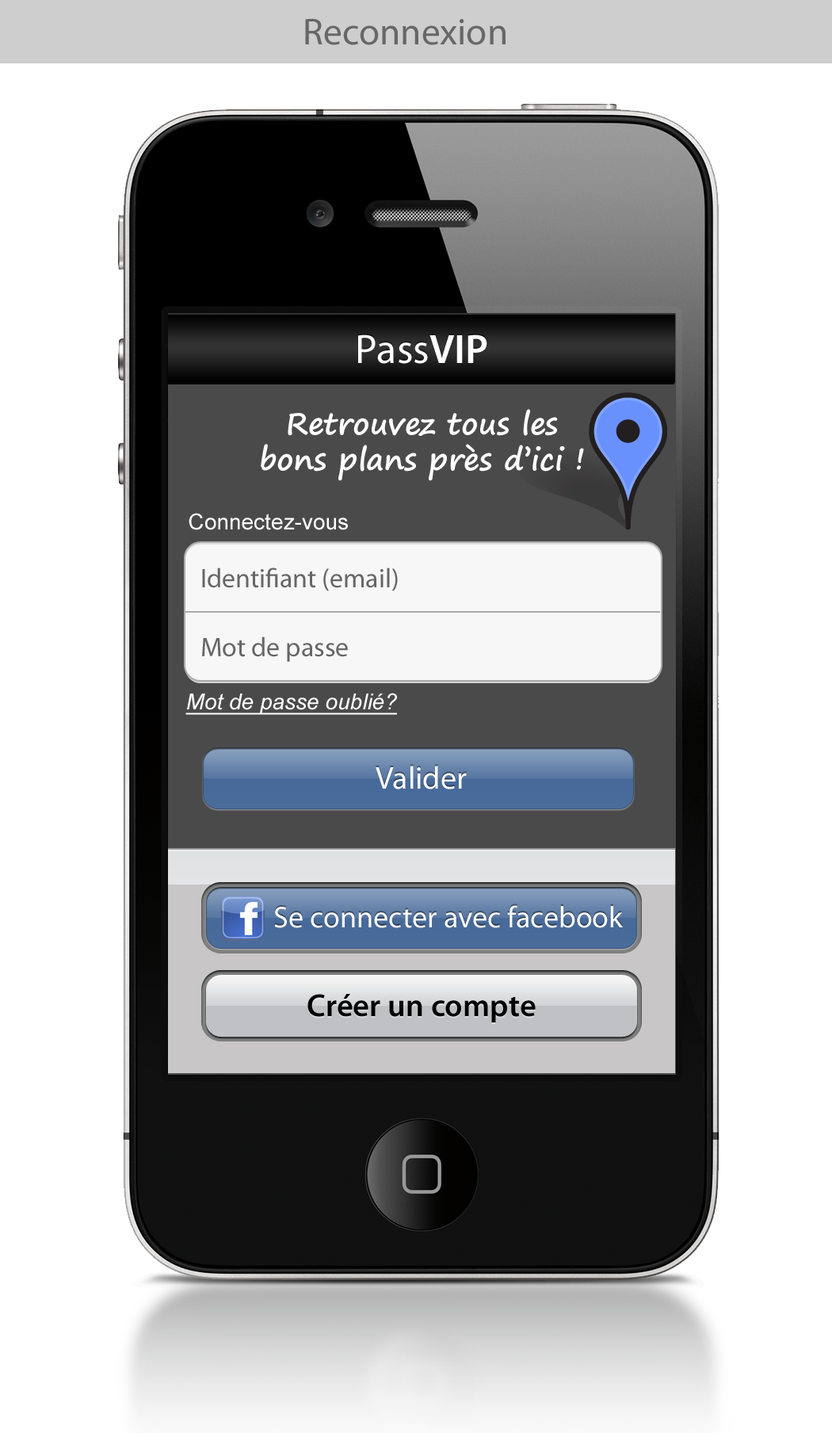
<style>
.page{position:relative;width:832px;height:1433px;background:#ffffff}
.page>*{position:absolute;margin:0}
.t1{font:37.7px "MyriadPro-Regular";color:#676767}
.t2{font:41.3px "MyriadPro-Regular";color:#ffffff}
.t3{font:41.3px "MyriadPro-Semibold";color:#ffffff}
.t4{font:30.1px "SegoePrint-Bold";color:#ffffff}
.t5{font:22.2px "ArialMT";color:#ffffff}
.t6{font:26.9px/69px "MyriadPro-Regular";color:#666666}
.t7{font:22.2px "Arial-ItalicMT";color:#ffffff;text-decoration:underline}
.t8{font:31.7px "MyriadPro-Regular";color:#ffffff}
.t9{font:30.1px "MyriadPro-Regular";color:#ffffff}
.t10{font:31.7px "MyriadPro-Semibold";letter-spacing:0.005em;color:#000000}
</style>
<div class="page">
<p class="t1" style="left:305px;top:18px;width:201px;height:27px">Reconnexion</p>
<p class="t2" style="left:358px;top:334px;width:129px;height:30px">Pass<span class="t3">VIP</span></p>
<p class="t4" style="left:261px;top:409px;width:323px;height:72px;text-align:center">Retrouvez tous les<br>bons plans près d’ici !</p>
<p class="t5" style="left:189px;top:513px;width:159px;height:17px">Connectez-vous</p>
<p class="t6" style="left:202px;top:567px;width:196px;height:95px">Identifiant (email)<br>Mot de passe</p>
<p class="t7" style="left:185px;top:693px;width:212px;height:22px">Mot de passe oublié?</p>
<p class="t8" style="left:376px;top:766px;width:91px;height:23px">Valider</p>
<p class="t9" style="left:274px;top:905px;width:349px;height:23px">Se connecter avec facebook</p>
<p class="t10" style="left:308px;top:994px;width:228px;height:28px">Créer un compte</p>
</div>
